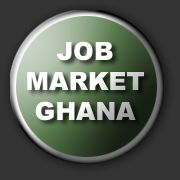
<style>
.page{position:relative;width:180px;height:180px;background:#333333}
.page>*{position:absolute;margin:0}
.t1{font:25px "Arial-Black";color:#fefffd}
</style>
<div class="page">
<p class="t1" style="left:27px;top:41px;width:117px;height:80px;text-align:center">JOB<br>MARKET<br>GHANA</p>
</div>
